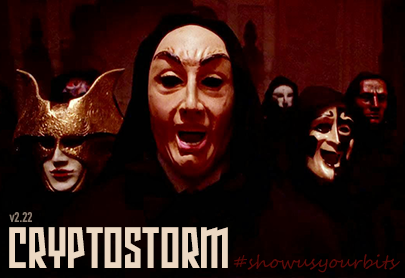
<style>
.page{position:relative;width:405px;height:278px}
.page>*{position:absolute;margin:0}
.t1{font:14px "DINEngschriftStd";color:#897c70}
.t2{font:56px "ArmorPiercing20BB";color:#ecd8c3}
.t3{font:18px "SegoeScript";color:#580a08}
</style>
<div class="page">
<p class="t1" style="left:9px;top:212px;width:23px;height:10px">v2.22</p>
<p class="t2" style="left:9px;top:227px;width:219px;height:41px">CRYPTOSTORM</p>
<p class="t3" style="left:233px;top:254px;width:167px;height:19px">#showusyourbits</p>
</div>
